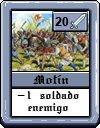
<style>
.page{position:relative;width:100px;height:128px}
.page>*{position:absolute;margin:0}
.t1{font:12px "Arial-BoldMT";color:#000000}
.t2{font:12px "SWGothe";color:#000000}
.t3{font:10px "SWGothe";color:#000000}
</style>
<div class="page">
<p class="t1" style="left:55px;top:17px;width:14px;height:9px">20</p>
<p class="t2" style="left:33px;top:75px;width:36px;height:9px">Motín</p>
<p class="t3" style="left:17px;top:91px;width:62px;height:23px;text-align:center">-1 soldado<br>enemigo</p>
</div>
